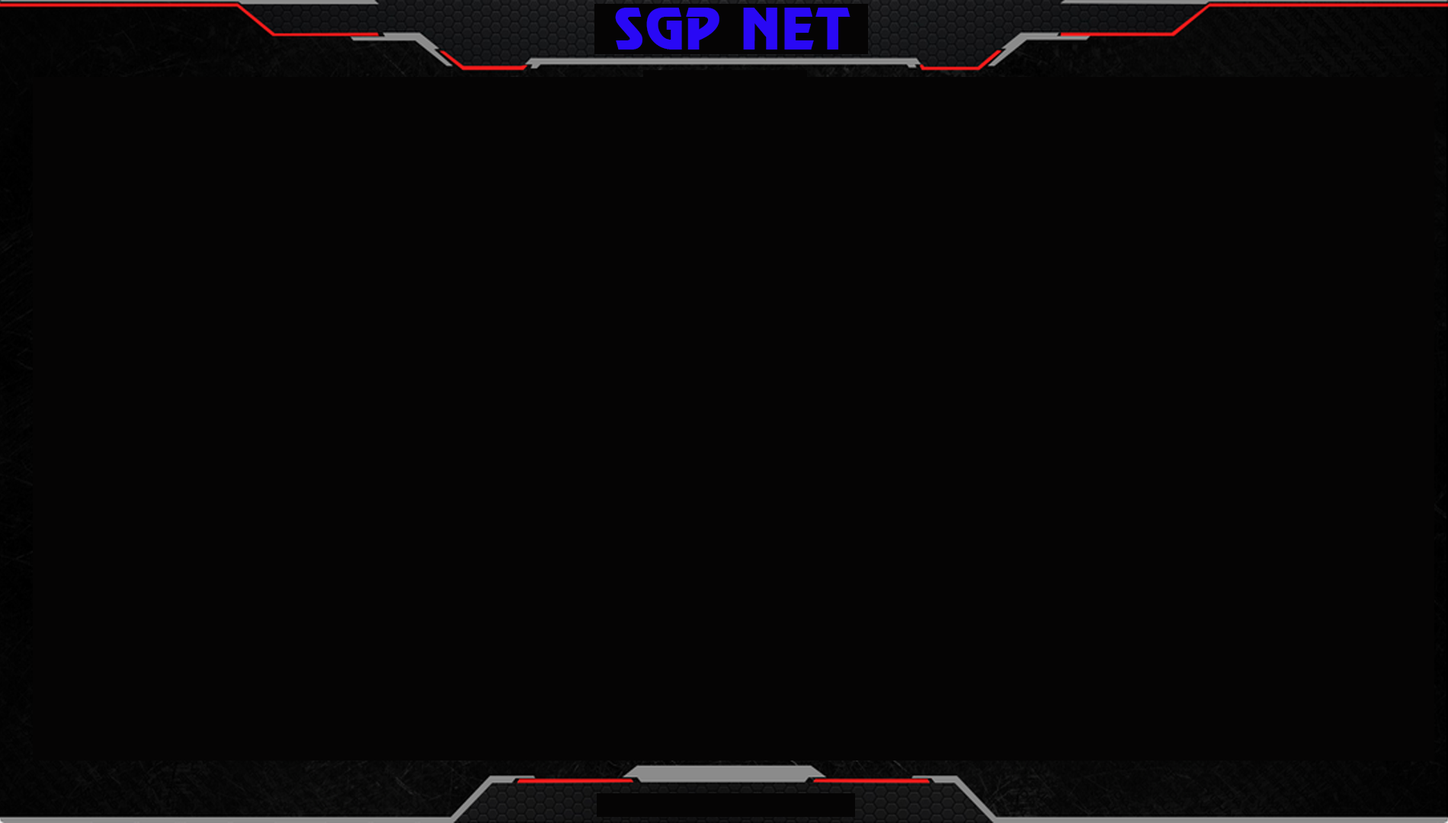
<style>
.page{position:relative;width:1448px;height:823px;background:#050404}
.page>*{position:absolute;margin:0}
.t1{font:51.1px "VNI-Revue-Bold";color:#2908f5}
</style>
<div class="page">
<p class="t1" style="left:615px;top:8px;width:236px;height:42px">SGP NET</p>
</div>
